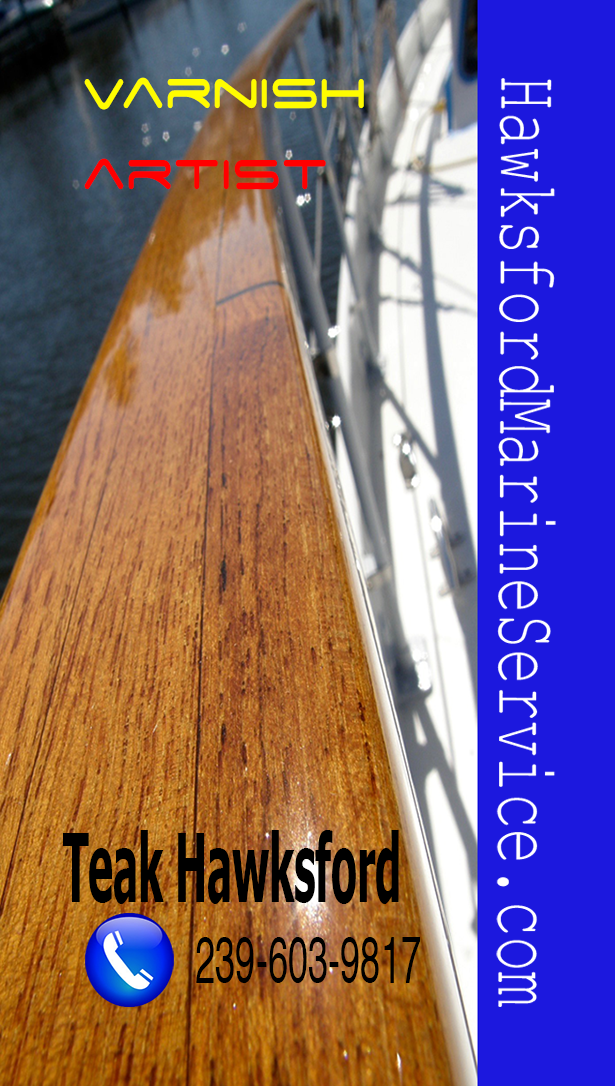
<style>
.page{position:relative;width:615px;height:1086px}
.page>*{position:absolute;margin:0}
.t1{font:66.8px "SpaceAge";color:#fffc00;scale:0.8 1}
.t2{font:66.8px "SpaceAge";color:#ff0000;scale:0.8 1}
.t3{font:95.4px "Tahoma-Bold";color:#000000;scale:0.44 1}
.t4{font:66.4px "Helvetica";color:#000000;scale:0.55 1}
</style>
<div class="page">
<p class="t1" style="left:84px;top:77px;width:280px;height:113px">Varnish<br><span class="t2">artist</span></p>
<p class="t3" style="left:63px;top:830px;width:336px;height:74px">Teak Hawksford</p>
<p class="t4" style="left:196px;top:937px;width:224px;height:46px">239-603-9817</p>
</div>
